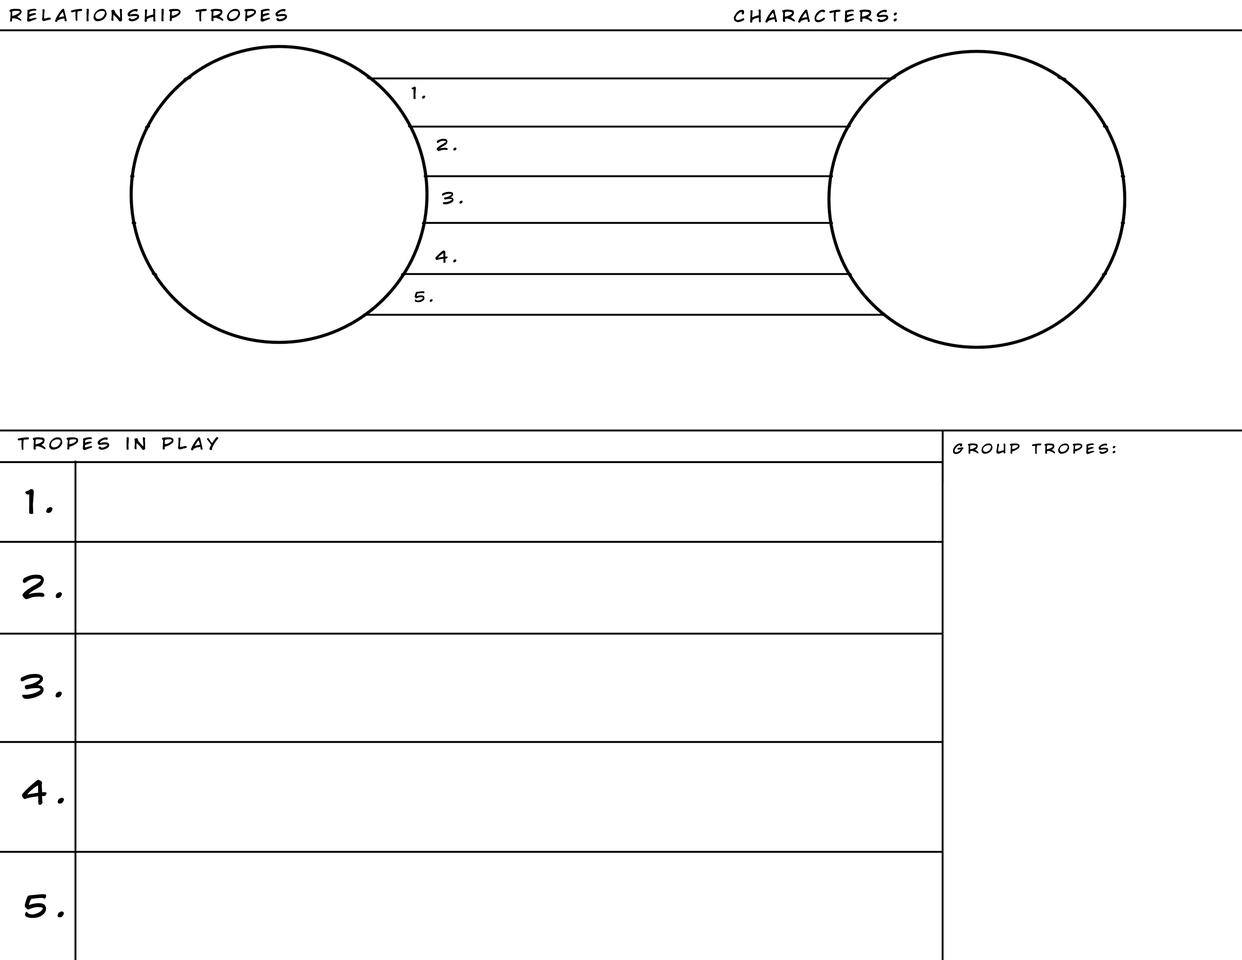
<style>
.page{position:relative;width:1242px;height:960px;background:#ffffff}
.page>*{position:absolute;margin:0}
.t1{font:15.6px "WildWordsRoman";letter-spacing:0.22em;color:#000000;scale:1.17 1}
.t2{font:14.3px "WildWordsRoman";letter-spacing:0.22em;color:#000000;scale:1.17 1}
.t3{font:13px "WildWordsRoman";letter-spacing:0.22em;color:#000000;scale:1.17 1}
.t4{font:31.2px "WildWordsRoman";letter-spacing:0.22em;color:#000000;scale:1.17 1}
</style>
<div class="page">
<p class="t1" style="left:9px;top:9px;width:278px;height:13px">Relationship Tropes</p>
<p class="t1" style="left:734px;top:9px;width:163px;height:14px">Characters:</p>
<p class="t1" style="left:411px;top:87px;width:14px;height:12px">1.</p>
<p class="t1" style="left:437px;top:139px;width:20px;height:12px">2.</p>
<p class="t1" style="left:442px;top:192px;width:21px;height:12px">3.</p>
<p class="t1" style="left:435px;top:250px;width:22px;height:13px">4.</p>
<p class="t2" style="left:414px;top:291px;width:19px;height:11px">5.</p>
<p class="t1" style="left:18px;top:437px;width:201px;height:13px">Tropes in play</p>
<p class="t3" style="left:953px;top:443px;width:163px;height:11px">Group Tropes:</p>
<p class="t4" style="left:25px;top:489px;width:28px;height:25px">1.</p>
<p class="t4" style="left:22px;top:574px;width:40px;height:25px">2.</p>
<p class="t4" style="left:21px;top:674px;width:41px;height:25px">3.</p>
<p class="t4" style="left:22px;top:780px;width:42px;height:25px">4.</p>
<p class="t4" style="left:25px;top:894px;width:39px;height:24px">5.</p>
</div>
